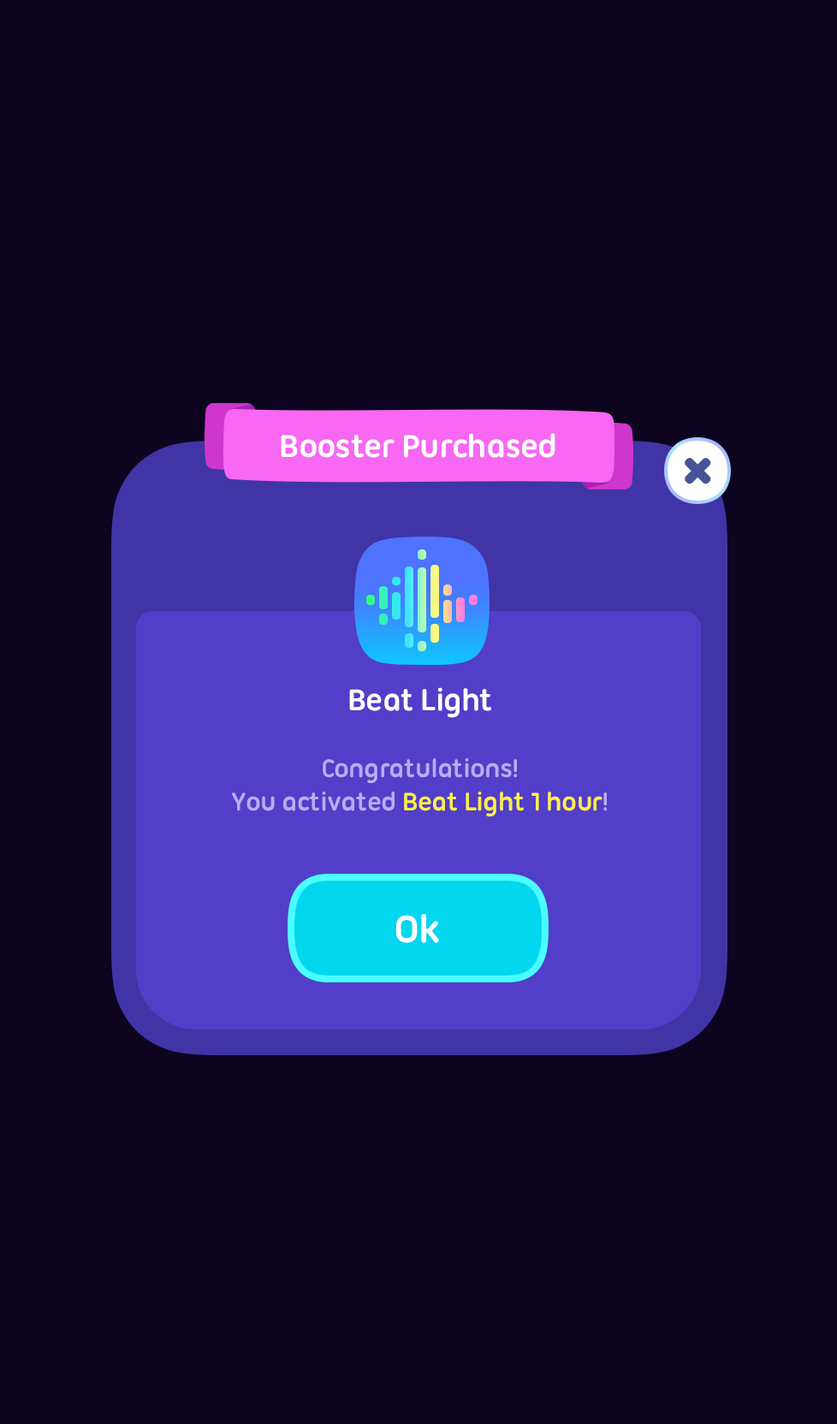
<style>
.page{position:relative;width:837px;height:1424px;background:#0d0420}
.page>*{position:absolute;margin:0}
.t1{font:34.2px "UbuntuTitling-Bold";letter-spacing:-0.025em;color:#ffffff}
.t2{font:32.5px "UbuntuTitling-Bold";letter-spacing:-0.025em;color:#ffffff}
.t3{font:27.4px "UbuntuTitling-Bold";letter-spacing:-0.025em;color:#bbabf4}
.t4{font:27.4px "UbuntuTitling-Bold";letter-spacing:-0.025em;color:#fff045}
.t5{font:41.1px "UbuntuTitling-Bold";letter-spacing:-0.025em;color:#ffffff}
</style>
<div class="page">
<p class="t1" style="left:281px;top:433px;width:275px;height:25px">Booster Purchased</p>
<p class="t2" style="left:349px;top:687px;width:142px;height:31px">Beat Light</p>
<p class="t3" style="left:232px;top:758px;width:375px;height:59px;text-align:center">Congratulations!<br>You activated <span class="t4">Beat Light 1 hour</span>!</p>
<p class="t5" style="left:396px;top:914px;width:43px;height:29px">Ok</p>
</div>
